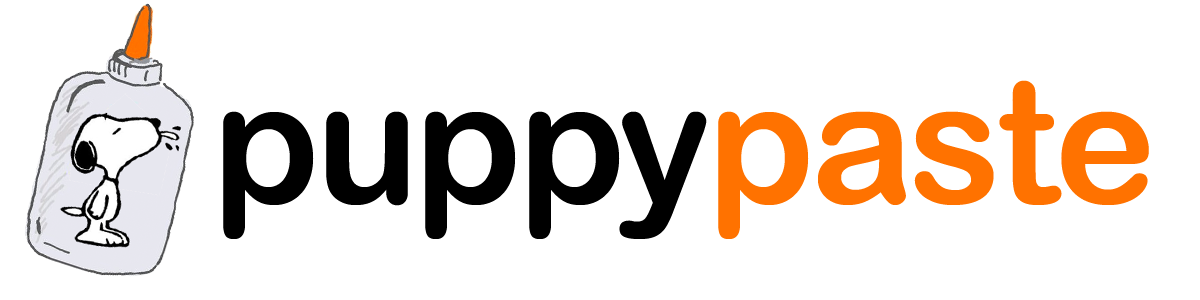
<style>
.page{position:relative;width:1200px;height:300px;background:#ffffff}
.page>*{position:absolute;margin:0}
.t1{font:172px "ArialRoundedMTBold";letter-spacing:-0.025em;color:#000000}
.t2{font:172px "ArialRoundedMTBold";letter-spacing:-0.025em;color:#ff7200}
</style>
<div class="page">
<p class="t1" style="left:223px;top:80px;width:926px;height:159px">puppy<span class="t2">paste</span></p>
</div>
